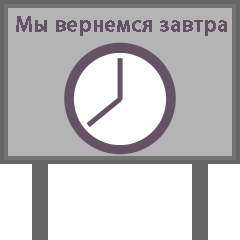
<style>
.page{position:relative;width:240px;height:240px;background:#b4b4b4}
.page>*{position:absolute;margin:0}
.t1{font:22px "MyriadPro-Regular";color:#665266;font-weight:bold}
</style>
<div class="page">
<p class="t1" style="left:16px;top:16px;width:211px;height:20px">Мы вернемся завтра</p>
</div>
